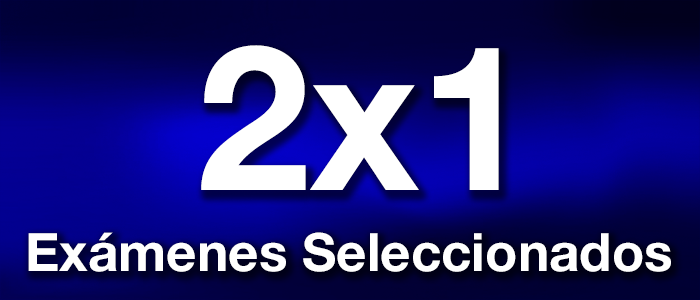
<style>
.page{position:relative;width:700px;height:300px}
.page>*{position:absolute;margin:0}
.t1{font:202.5px "HelveticaNeue-Bold";color:#ffffff}
.t2{font:53px "HelveticaNeue-Bold";color:#ffffff}
</style>
<div class="page">
<p class="t1" style="left:201px;top:45px;width:298px;height:145px">2x1</p>
<p class="t2" style="left:28px;top:232px;width:643px;height:40px">Exámenes Seleccionados</p>
</div>
